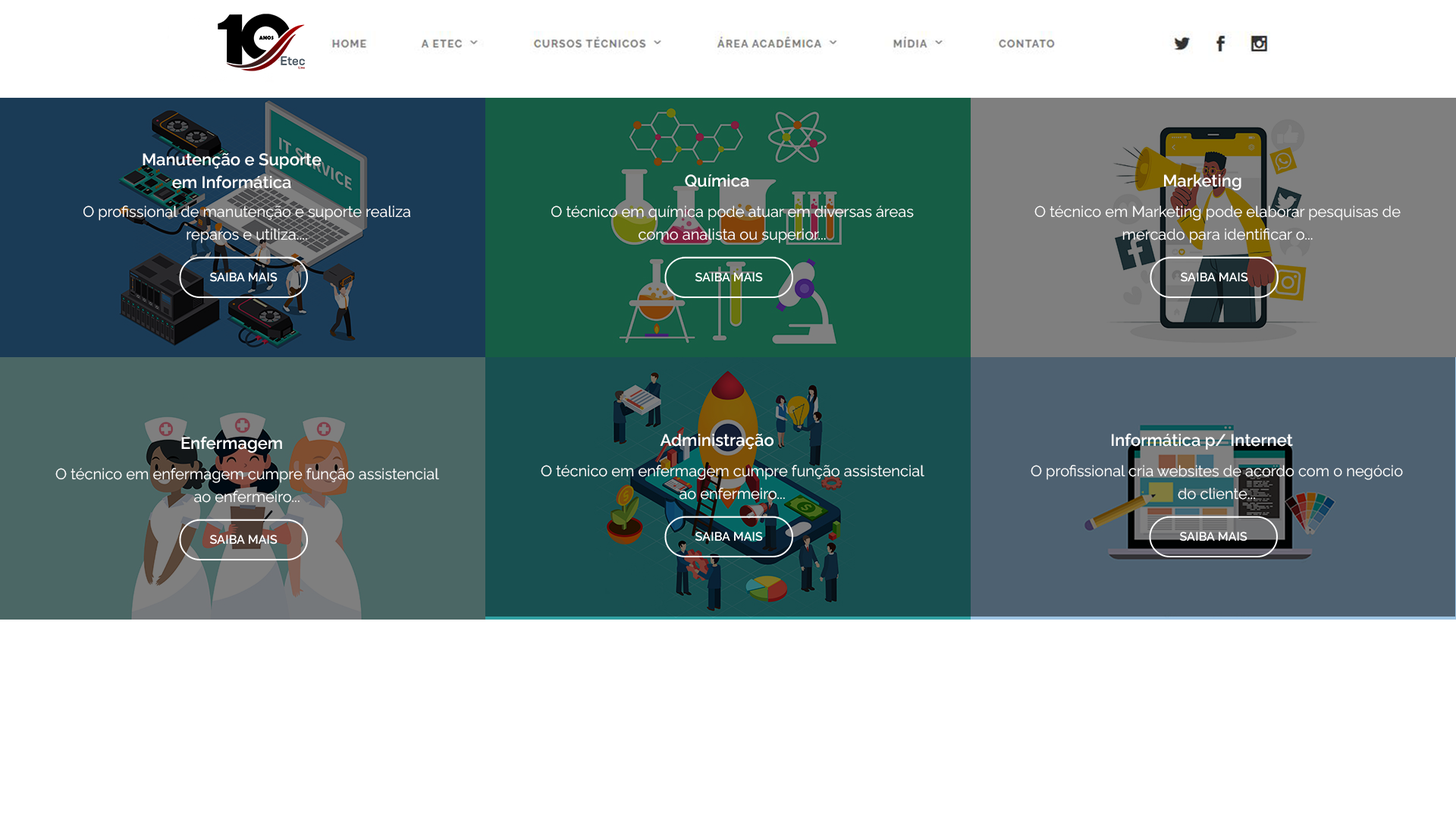
<style>
.page{position:relative;width:1456px;height:819px;background:#ffffff}
.page>*{position:absolute;margin:0}
.t1{font:16.7px/22.7px "Raleway-SemiBold";color:#ffffff}
.t2{font:16.7px "Raleway-SemiBold";color:#ffffff}
.t3{font:15.1px/22.7px "Raleway-Regular";color:#ffffff}
</style>
<div class="page">
<p class="t1" style="left:143px;top:153px;width:179px;height:36px;text-align:center">Manutenção e Suporte<br>em Informática</p>
<p class="t2" style="left:685px;top:174px;width:64px;height:13px">Química</p>
<p class="t2" style="left:1164px;top:174px;width:77px;height:16px">Marketing</p>
<p class="t3" style="left:83px;top:206px;width:328px;height:37px;text-align:center">O profissional de manutenção e suporte realiza<br>reparos e utiliza....</p>
<p class="t3" style="left:551px;top:206px;width:363px;height:37px;text-align:center">O técnico em química pode atuar em diversas áreas<br>como analista ou superior...</p>
<p class="t3" style="left:1034px;top:206px;width:367px;height:37px;text-align:center">O técnico em Marketing pode elaborar pesquisas de<br>mercado para identificar o...</p>
<p class="t2" style="left:181px;top:436px;width:101px;height:17px">Enfermagem</p>
<p class="t2" style="left:660px;top:434px;width:113px;height:16px">Administração</p>
<p class="t2" style="left:1112px;top:433px;width:181px;height:17px">Informática p/ Internet</p>
<p class="t3" style="left:55px;top:468px;width:384px;height:35px;text-align:center">O técnico em enfermagem cumpre função assistencial<br>ao enfermeiro...</p>
<p class="t3" style="left:541px;top:465px;width:383px;height:35px;text-align:center">O técnico em enfermagem cumpre função assistencial<br>ao enfermeiro...</p>
<p class="t3" style="left:1031px;top:465px;width:372px;height:35px;text-align:center">O profissional cria websites de acordo com o negócio<br>do cliente...</p>
</div>
